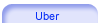
<style>
.page{position:relative;width:100px;height:23px;background:#e1e4fc}
.page>*{position:absolute;margin:0}
.t1{font:11px "ArialMT";color:#092ff6}
</style>
<div class="page">
<p class="t1" style="left:36px;top:12px;width:24px;height:8px">Uber</p>
</div>
